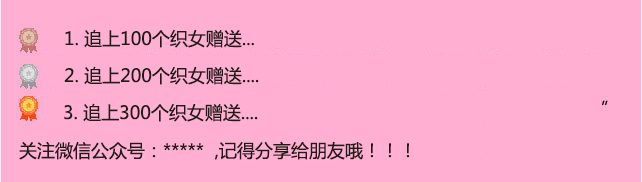
<style>
.page{position:relative;width:642px;height:182px;background:#ffafd2}
.page>*{position:absolute;margin:0}
.t1{font:18px "MicrosoftYaHei";color:#1d1c15}
</style>
<div class="page">
<p class="t1" style="left:65px;top:29px;width:189px;height:19px">1. 追上100个织女赠送...</p>
<p class="t1" style="left:64px;top:66px;width:195px;height:19px">2. 追上200个织女赠送....</p>
<p class="t1" style="left:64px;top:103px;width:194px;height:19px">3. 追上300个织女赠送....</p>
<p class="t1" style="left:19px;top:141px;width:391px;height:19px">关注微信公众号：*****  ,记得分享给朋友哦！！！</p>
</div>
